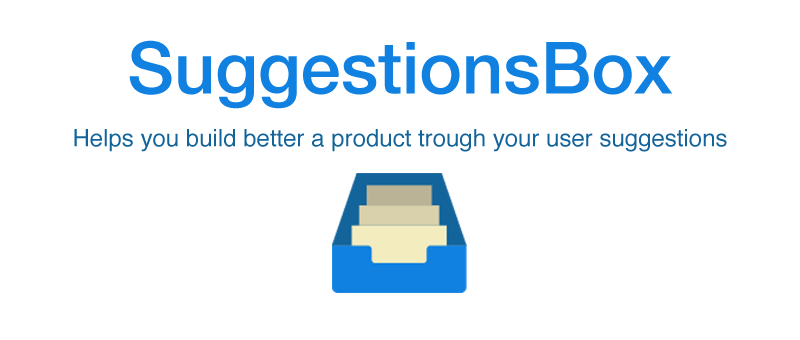
<style>
.page{position:relative;width:800px;height:340px;background:#ffffff}
.page>*{position:absolute;margin:0}
.t1{font:72px "HelveticaNeue-Medium";color:#1081e0}
.t2{font:24px "Helvetica";color:#13649b}
</style>
<div class="page">
<p class="t1" style="left:129px;top:40px;width:544px;height:69px">SuggestionsBox</p>
<p class="t2" style="left:74px;top:129px;width:653px;height:23px">Helps you build better a product trough your user suggestions</p>
</div>
